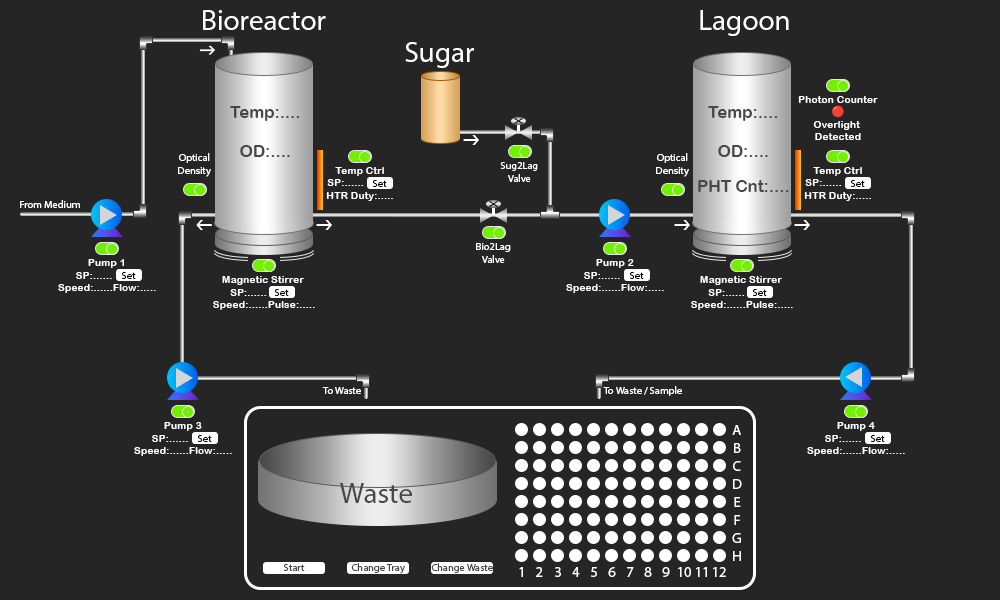
<style>
.page{position:relative;width:1000px;height:600px;background:#252525}
.page>*{position:absolute;margin:0}
.t1{font:29.2px "MyriadPro-Regular";color:#ffffff}
.t2{font:10.4px "ArialRoundedMTBold";color:#ffffff}
.t3{font:10.4px "NotoColorEmoji-SVG";color:#ffffff}
.t4{font:16.7px "ArialRoundedMTBold";color:#484848}
.t5{font:10.4px "MyriadPro-Regular";color:#ffffff}
.t6{font:10.4px "MyriadPro-Regular";color:#000000}
.t7{font:14.6px "MyriadPro-Regular";color:#ffffff}
.t8{font:29.2px "MyriadPro-Regular";color:#484848}
.t9{font:10.4px "MyriadPro-Regular";color:#484848}
</style>
<div class="page">
<p class="t1" style="left:203px;top:10px;width:123px;height:20px">Bioreactor</p>
<p class="t1" style="left:700px;top:10px;width:89px;height:26px">Lagoon</p>
<p class="t1" style="left:405px;top:42px;width:69px;height:26px">Sugar</p>
<p class="t2" style="left:798px;top:96px;width:80px;height:44px;text-align:center">Photon Counter<br><span class="t3">🔴</span><br>Overlight <br>Detected</p>
<p class="t4" style="left:230px;top:106px;width:70px;height:15px">Temp:....</p>
<p class="t4" style="left:708px;top:106px;width:70px;height:15px">Temp:....</p>
<p class="t4" style="left:240px;top:145px;width:50px;height:12px">OD:....</p>
<p class="t4" style="left:718px;top:145px;width:50px;height:12px">OD:....</p>
<p class="t5" style="left:178px;top:153px;width:33px;height:24px;text-align:center">Optical<br>Density</p>
<p class="t5" style="left:656px;top:153px;width:33px;height:24px;text-align:center">Optical<br>Density</p>
<p class="t2" style="left:326px;top:167px;width:67px;height:34px;text-align:center">Temp Ctrl<br>SP:......           <br>HTR Duty:.....</p>
<p class="t5" style="left:500px;top:162px;width:38px;height:20px;text-align:center">Sug2Lag<br>Valve</p>
<p class="t2" style="left:804px;top:167px;width:67px;height:34px;text-align:center">Temp Ctrl<br>SP:......           <br>HTR Duty:.....</p>
<p class="t6" style="left:372px;top:180px;width:15px;height:7px">Set</p>
<p class="t4" style="left:698px;top:180px;width:91px;height:12px">PHT Cnt:....</p>
<p class="t6" style="left:850px;top:180px;width:15px;height:7px">Set</p>
<p class="t5" style="left:20px;top:200px;width:60px;height:8px">From Medium</p>
<p class="t5" style="left:476px;top:243px;width:35px;height:20px;text-align:center">Bio2Lag<br>Valve</p>
<p class="t2" style="left:88px;top:259px;width:36px;height:9px">Pump 1</p>
<p class="t2" style="left:596px;top:259px;width:38px;height:9px">Pump 2</p>
<p class="t2" style="left:58px;top:272px;width:98px;height:21px;text-align:center">SP:......          <br>Speed:......Flow:.....</p>
<p class="t6" style="left:121px;top:272px;width:15px;height:7px">Set</p>
<p class="t2" style="left:222px;top:276px;width:82px;height:9px">Magnetic Stirrer</p>
<p class="t2" style="left:566px;top:272px;width:98px;height:21px;text-align:center">SP:......          <br>Speed:......Flow:.....</p>
<p class="t6" style="left:629px;top:272px;width:15px;height:7px">Set</p>
<p class="t2" style="left:700px;top:276px;width:82px;height:9px">Magnetic Stirrer</p>
<p class="t2" style="left:213px;top:289px;width:102px;height:21px;text-align:center">SP:......            <br>Speed:......Pulse:.....</p>
<p class="t6" style="left:274px;top:289px;width:15px;height:7px">Set</p>
<p class="t2" style="left:691px;top:289px;width:102px;height:21px;text-align:center">SP:......            <br>Speed:......Pulse:.....</p>
<p class="t6" style="left:752px;top:289px;width:15px;height:7px">Set</p>
<p class="t5" style="left:322px;top:387px;width:39px;height:7px">To Waste</p>
<p class="t5" style="left:603px;top:386px;width:79px;height:10px">To Waste / Sample</p>
<p class="t2" style="left:164px;top:422px;width:38px;height:9px">Pump 3</p>
<p class="t7" style="left:732px;top:425px;width:9px;height:10px">A</p>
<p class="t2" style="left:837px;top:422px;width:38px;height:9px">Pump 4</p>
<p class="t2" style="left:134px;top:435px;width:98px;height:21px;text-align:center">SP:......          <br>Speed:......Flow:.....</p>
<p class="t6" style="left:197px;top:435px;width:15px;height:7px">Set</p>
<p class="t2" style="left:807px;top:435px;width:98px;height:21px;text-align:center">SP:......          <br>Speed:......Flow:.....</p>
<p class="t6" style="left:870px;top:435px;width:15px;height:7px">Set</p>
<p class="t7" style="left:734px;top:443px;width:7px;height:10px">B</p>
<p class="t7" style="left:733px;top:461px;width:8px;height:10px">C</p>
<p class="t8" style="left:340px;top:483px;width:72px;height:20px">Waste</p>
<p class="t7" style="left:733px;top:479px;width:9px;height:10px">D</p>
<p class="t7" style="left:734px;top:497px;width:7px;height:10px">E</p>
<p class="t7" style="left:734px;top:515px;width:6px;height:10px">F</p>
<p class="t7" style="left:732px;top:533px;width:9px;height:10px">G</p>
<p class="t7" style="left:733px;top:551px;width:8px;height:10px">H</p>
<p class="t9" style="left:283px;top:564px;width:22px;height:7px">Start</p>
<p class="t9" style="left:351px;top:563px;width:54px;height:11px">Change Tray</p>
<p class="t9" style="left:431px;top:563px;width:62px;height:10px">Change Waste</p>
<p class="t7" style="left:519px;top:567px;width:4px;height:10px">1</p>
<p class="t7" style="left:536px;top:567px;width:7px;height:10px">2</p>
<p class="t7" style="left:555px;top:567px;width:6px;height:10px">3</p>
<p class="t7" style="left:572px;top:567px;width:8px;height:10px">4</p>
<p class="t7" style="left:591px;top:567px;width:6px;height:10px">5</p>
<p class="t7" style="left:608px;top:567px;width:8px;height:10px">6</p>
<p class="t7" style="left:627px;top:567px;width:7px;height:10px">7</p>
<p class="t7" style="left:644px;top:567px;width:8px;height:10px">8</p>
<p class="t7" style="left:662px;top:567px;width:8px;height:10px">9</p>
<p class="t7" style="left:678px;top:567px;width:13px;height:10px">10</p>
<p class="t7" style="left:696px;top:567px;width:11px;height:10px">11</p>
<p class="t7" style="left:713px;top:567px;width:13px;height:10px">12</p>
</div>
